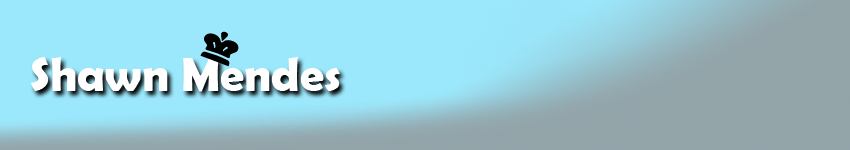
<style>
.page{position:relative;width:850px;height:150px}
.page>*{position:absolute;margin:0}
.t1{font:48px "BerlinSansFBDemi-Bold";color:#ffffff}
</style>
<div class="page">
<p class="t1" style="left:31px;top:57px;width:309px;height:35px">Shawn Mendes</p>
</div>
